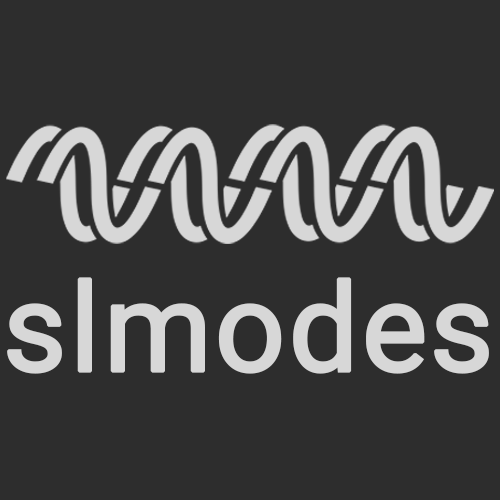
<style>
.page{position:relative;width:500px;height:500px;background:#2d2d2d}
.page>*{position:absolute;margin:0}
.t1{font:123.4px "Roboto-Regular";color:#d7d7d7;font-weight:bold}
</style>
<div class="page">
<p class="t1" style="left:7px;top:277px;width:482px;height:97px">slmodes</p>
</div>
